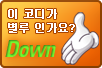
<style>
.page{position:relative;width:102px;height:68px}
.page>*{position:absolute;margin:0}
.t1{font:11px/14px "Dotum";letter-spacing:-0.05em;color:#ffffff;font-weight:bold}
.t2{font:23px "Univeconbolobl";letter-spacing:-0.05em}
</style>
<div class="page">
<p class="t1" style="left:8px;top:9px;width:67px;height:24px">이 코디가<br>별루 인가요?</p>
<p class="t2" style="left:5px;top:40px;width:51px;height:17px">Down</p>
</div>
